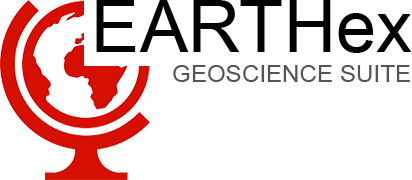
<style>
.page{position:relative;width:412px;height:180px;background:#ffffff}
.page>*{position:absolute;margin:0}
.t1{font:72px "ArialMT";letter-spacing:0.005em;color:#000000}
.t2{font:24px "ArialMT";letter-spacing:0.005em;color:#555555}
</style>
<div class="page">
<p class="t1" style="left:96px;top:0px;width:316px;height:53px">EARTHex</p>
<p class="t2" style="left:173px;top:65px;width:237px;height:17px">GEOSCIENCE SUITE</p>
</div>
